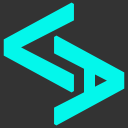
<style>
.page{position:relative;width:128px;height:128px;background:#333333}
.page>*{position:absolute;margin:0}
.t1{font:193.2px "TaipeiSansTCBeta-Regular";letter-spacing:-0.44em;color:#03f7eb;font-weight:bold;scale:0.72 1}
</style>
<div class="page">
<p class="t1" style="left:3px;top:2px;width:71px;height:91px">&lt;</p>
<p class="t1" style="left:54px;top:35px;width:71px;height:91px;rotate:180deg">&lt;</p>
</div>
